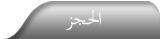
<style>
.page{position:relative;width:160px;height:39px}
.page>*{position:absolute;margin:0}
.t1{font:26px "TraditionalArabic";letter-spacing:-0.08em;color:#fbfcfc}
</style>
<div class="page">
<p class="t1" style="left:65px;top:10px;width:36px;height:20px">ا لحجز</p>
</div>
